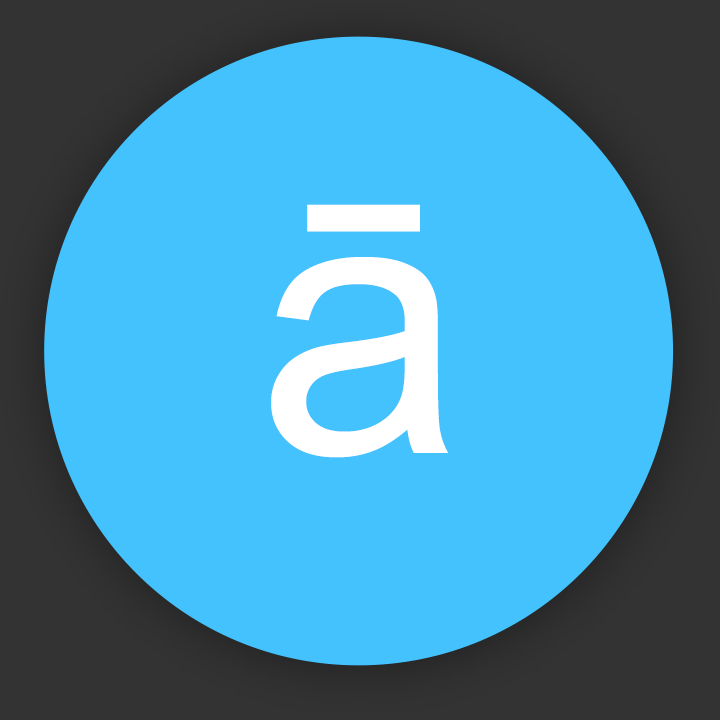
<style>
.page{position:relative;width:720px;height:720px;background:#43c2fd}
.page>*{position:absolute;margin:0}
.t1{font:369.7px "ArialMT";color:#ffffff}
</style>
<div class="page">
<p class="t1" style="left:271px;top:204px;width:177px;height:254px">ā</p>
</div>
